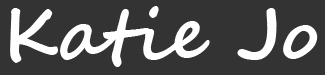
<style>
.page{position:relative;width:325px;height:75px;background:#333333}
.page>*{position:absolute;margin:0}
.t1{font:72px "SegoeScript-Bold";color:#ffffff}
</style>
<div class="page">
<p class="t1" style="left:10px;top:6px;width:308px;height:61px">Katie Jo</p>
</div>
